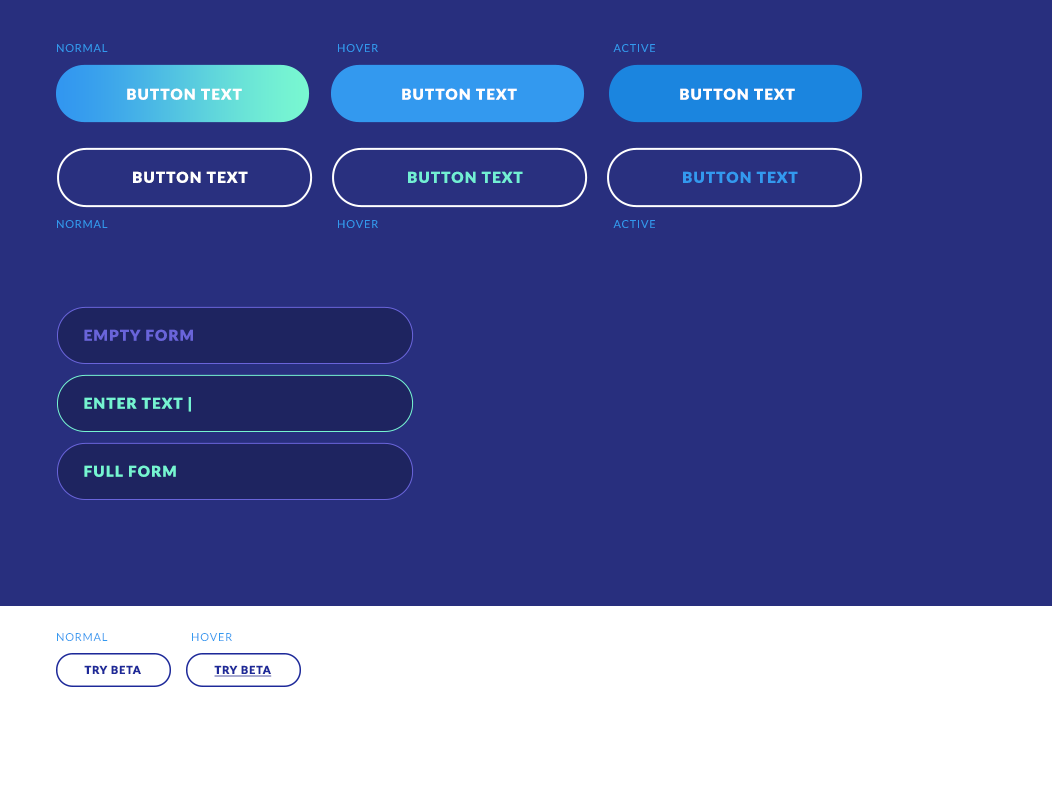
<style>
.page{position:relative;width:1052px;height:805px;background:#282f7e}
.page>*{position:absolute;margin:0}
.t1{font:11px "Lato-Regular";letter-spacing:0.075em;color:#3399ef;text-transform:uppercase}
.t2{font:15px "Lato-Black";letter-spacing:0.075em;color:#ffffff;text-transform:uppercase}
.t3{font:15px "Lato-Black";letter-spacing:0.075em;color:#72efd4;text-transform:uppercase}
.t4{font:15px "Lato-Black";letter-spacing:0.075em;color:#3399ef;text-transform:uppercase}
.t5{font:15px "Lato-Black";letter-spacing:0.075em;color:#6964da;text-transform:uppercase}
.t6{font:15px "Lato-Black";letter-spacing:0.075em;color:#75f3d2;text-transform:uppercase}
.t7{font:15px "Lato-Black";letter-spacing:0.075em;color:#76f5d2;text-transform:uppercase}
.t8{font:11px "Lato-Black";letter-spacing:0.075em;color:#1d2999;text-transform:uppercase}
.t9{font:11px "Lato-Black";letter-spacing:0.075em;color:#1d2999;text-transform:uppercase;text-decoration:underline}
</style>
<div class="page">
<p class="t1" style="left:57px;top:44px;width:51px;height:8px">normal</p>
<p class="t1" style="left:338px;top:44px;width:40px;height:8px">hover</p>
<p class="t1" style="left:613px;top:44px;width:42px;height:8px">active</p>
<p class="t2" style="left:127px;top:88px;width:115px;height:12px">button text</p>
<p class="t2" style="left:402px;top:88px;width:115px;height:12px">button text</p>
<p class="t2" style="left:680px;top:88px;width:115px;height:12px">button text</p>
<p class="t2" style="left:133px;top:171px;width:115px;height:12px">button text</p>
<p class="t3" style="left:408px;top:171px;width:115px;height:12px">button text</p>
<p class="t4" style="left:683px;top:171px;width:115px;height:12px">button text</p>
<p class="t1" style="left:57px;top:220px;width:51px;height:8px">normal</p>
<p class="t1" style="left:338px;top:220px;width:40px;height:8px">hover</p>
<p class="t1" style="left:613px;top:220px;width:42px;height:8px">active</p>
<p class="t5" style="left:84px;top:329px;width:109px;height:12px">empty form</p>
<p class="t6" style="left:84px;top:397px;width:107px;height:15px">enter text |</p>
<p class="t7" style="left:84px;top:465px;width:92px;height:12px">full form</p>
<p class="t1" style="left:57px;top:633px;width:51px;height:8px">normal</p>
<p class="t1" style="left:192px;top:633px;width:40px;height:8px">hover</p>
<p class="t8" style="left:84px;top:665px;width:57px;height:9px">try beta</p>
<p class="t9" style="left:214px;top:665px;width:58px;height:12px">try beta</p>
</div>
